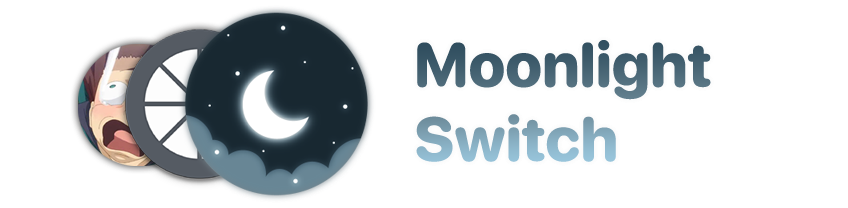
<style>
.page{position:relative;width:848px;height:208px;background:#ffffff}
.page>*{position:absolute;margin:0}
.t1{font:62px "SFProRounded-Heavy"}
</style>
<div class="page">
<p class="t1" style="left:416px;top:40px;width:295px;height:122px">Moonlight<br>Switch</p>
</div>
